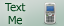
<style>
.page{position:relative;width:64px;height:26px}
.page>*{position:absolute;margin:0}
.t1{font:11px "Tahoma";color:#004018}
</style>
<div class="page">
<p class="t1" style="left:5px;top:3px;width:21px;height:22px;text-align:center">Text<br>Me</p>
</div>
